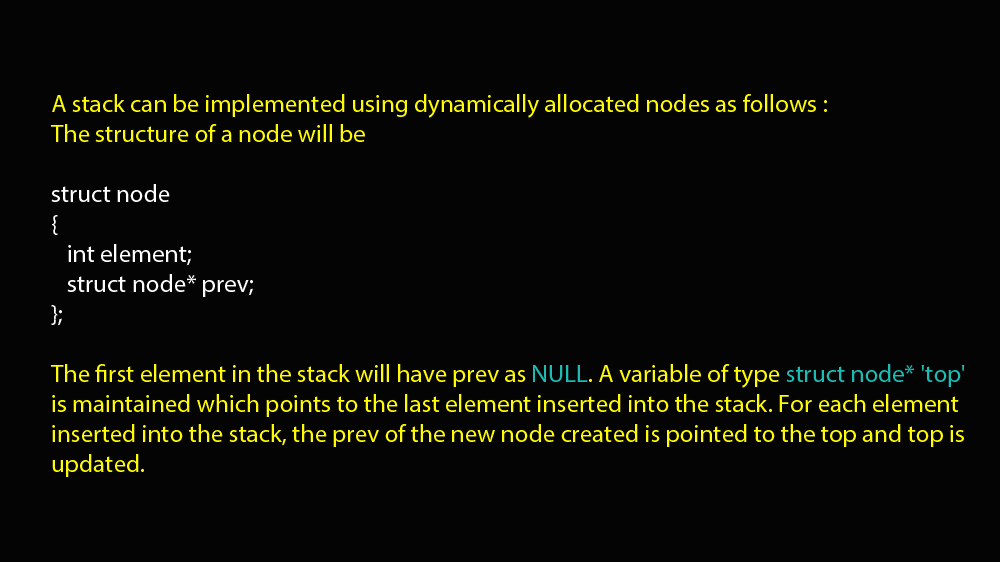
<style>
.page{position:relative;width:1000px;height:562px;background:#050404}
.page>*{position:absolute;margin:0}
.t1{font:25px "MyriadPro-Regular";color:#fefb04}
.t2{font:25px "MyriadPro-Regular";color:#fffffe}
.t3{font:25px "MyriadPro-Regular";color:#1cbbb4}
</style>
<div class="page">
<p class="t1" style="left:51px;top:94px;width:914px;height:383px">A stack can be implemented using dynamically allocated nodes as follows :<br>The structure of a node will be<br><br><span class="t2">struct node<br>{<br>   int element;<br>   struct node* prev;<br>};<br><br></span>The first element in the stack will have prev as <span class="t3">NULL</span>. A variable of type <span class="t3">struct node* 'top'</span> is maintained which points to the last element inserted into the stack. For each element inserted into the stack, the prev of the new node created is pointed to the top and top is updated.</p>
</div>
